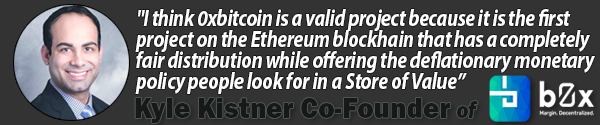
<style>
.page{position:relative;width:600px;height:125px;background:#333333}
.page>*{position:absolute;margin:0}
.t1{font:23.2px/21px "MyriadPro-BoldIt";letter-spacing:-0.02em;color:#ffffff;scale:0.84 1}
.t2{font:29.4px "FranklinGothicURW-Hea";color:#1c1c1c;scale:0.95 1}
.t3{font:24px "FranklinGothicURW-HeaIta";color:#1c1c1c;scale:0.83 1}
</style>
<div class="page">
<p class="t1" style="left:135px;top:9px;width:460px;height:85px">"I think 0xbitcoin is a valid project because it is the first <br>project on the Ethereum blockhain that has a completely <br>fair distribution while offering the deflationary monetary <br>policy people look for in a Store of Value”</p>
<p class="t2" style="left:135px;top:98px;width:315px;height:25px">Kyle Kistner Co-Founder</p>
<p class="t3" style="left:457px;top:101px;width:21px;height:17px">of</p>
</div>
